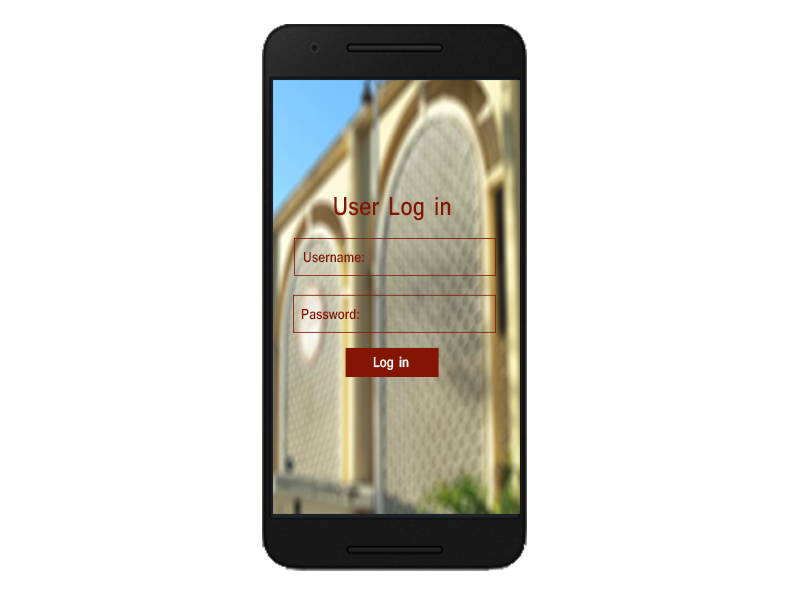
<style>
.page{position:relative;width:792px;height:612px;background:#ffffff}
.page>*{position:absolute;margin:0}
.t1{font:27px "Shruti-Bold";letter-spacing:0.01em;color:#841503;scale:0.84 1}
.t2{font:15.2px "Shruti-Bold";letter-spacing:0.01em;color:#841503;scale:0.85 1}
.t3{font:15.2px "Shruti-Bold";letter-spacing:0.01em;color:#fcf7f6;scale:0.85 1}
</style>
<div class="page">
<p class="t1" style="left:334px;top:197px;width:117px;height:24px">User Log in</p>
<p class="t2" style="left:303px;top:251px;width:61px;height:12px">Username:</p>
<p class="t2" style="left:301px;top:308px;width:58px;height:12px">Password:</p>
<p class="t3" style="left:373px;top:356px;width:36px;height:14px">Log in</p>
</div>
